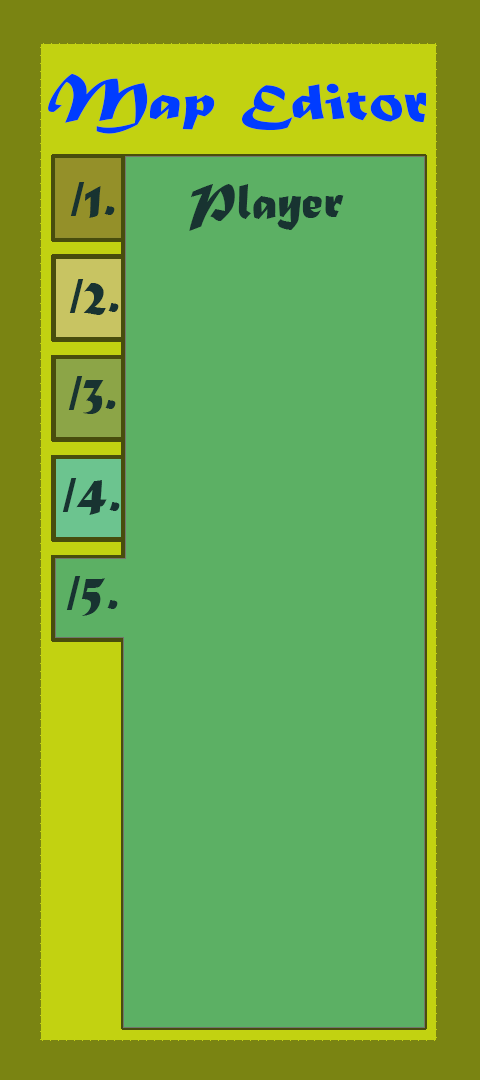
<style>
.page{position:relative;width:480px;height:1080px;background:#5cb064}
.page>*{position:absolute;margin:0}
.t1{font:75px "MaturaMTScriptCapitals";color:#003cff;scale:0.92 1}
.t2{font:52.3px "MaturaMTScriptCapitals";color:#183331}
</style>
<div class="page">
<p class="t1" style="left:48px;top:73px;width:379px;height:61px">Map Editor</p>
<p class="t2" style="left:70px;top:182px;width:45px;height:36px">/1.</p>
<p class="t2" style="left:189px;top:184px;width:155px;height:47px">Player</p>
<p class="t2" style="left:69px;top:279px;width:50px;height:36px">/2.</p>
<p class="t2" style="left:68px;top:376px;width:48px;height:38px">/3.</p>
<p class="t2" style="left:62px;top:478px;width:58px;height:37px">/4.</p>
<p class="t2" style="left:66px;top:576px;width:52px;height:40px">/5.</p>
</div>
